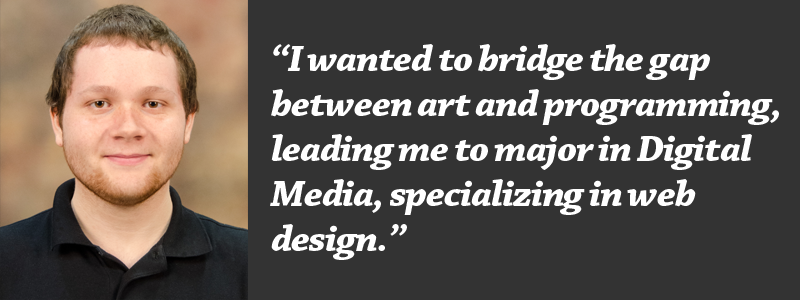
<style>
.page{position:relative;width:800px;height:300px;background:#333333}
.page>*{position:absolute;margin:0}
.t1{font:37.5px "ChaparralPro-BoldIt";letter-spacing:-0.035em;color:#ffffff;scale:1.08 1}
</style>
<div class="page">
<p class="t1" style="left:270px;top:44px;width:509px;height:216px">“I wanted to bridge the gap <br>between art and programming, leading me to major in Digital Media, specializing in web design.”</p>
</div>
